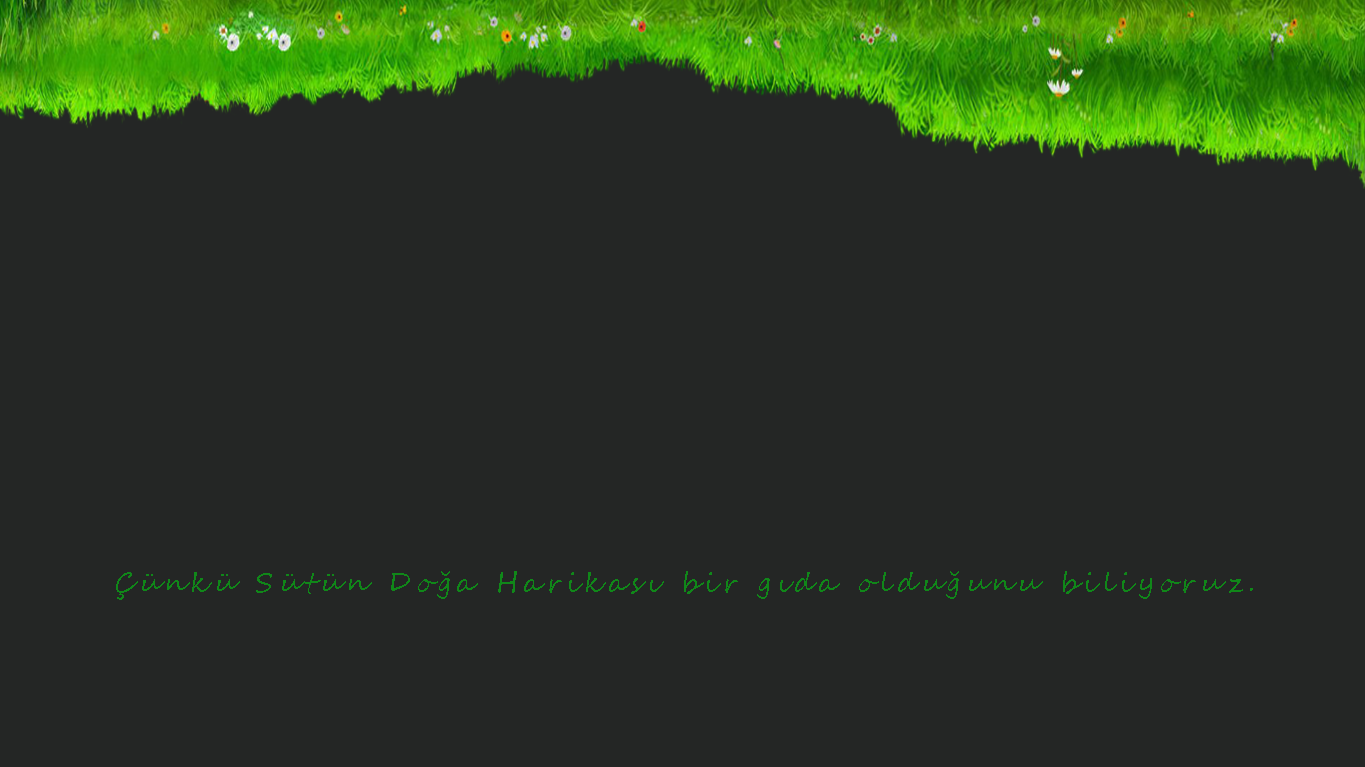
<style>
.page{position:relative;width:1365px;height:767px;background:#242625}
.page>*{position:absolute;margin:0}
.t1{font:26.7px "SegoeScript";letter-spacing:0.2em;color:#108719}
</style>
<div class="page">
<p class="t1" style="left:116px;top:571px;width:1137px;height:29px">Çünkü Sütün Doğa Harikası bir gıda olduğunu biliyoruz.</p>
</div>
